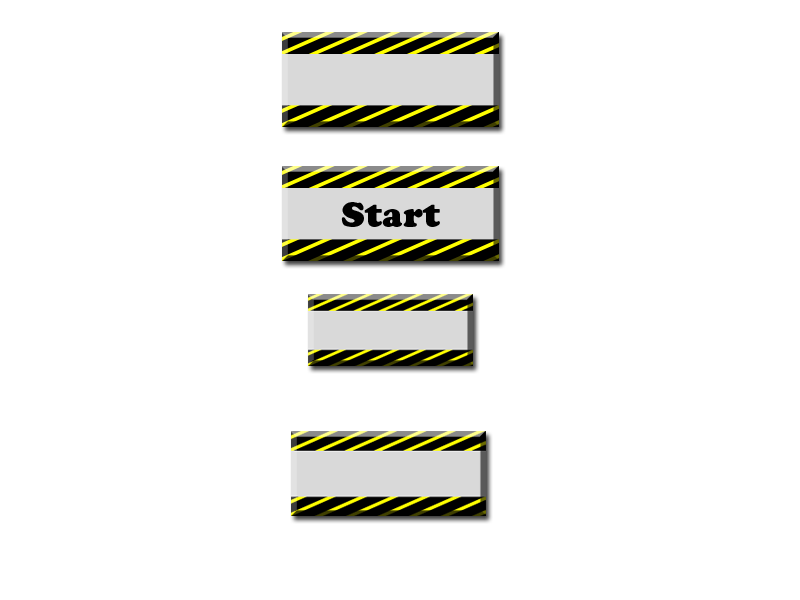
<style>
.page{position:relative;width:800px;height:600px;background:#ffffff}
.page>*{position:absolute;margin:0}
.t1{font:35px "CooperBlackStd";color:#000000}
</style>
<div class="page">
<p class="t1" style="left:341px;top:202px;width:99px;height:25px">Start</p>
</div>
